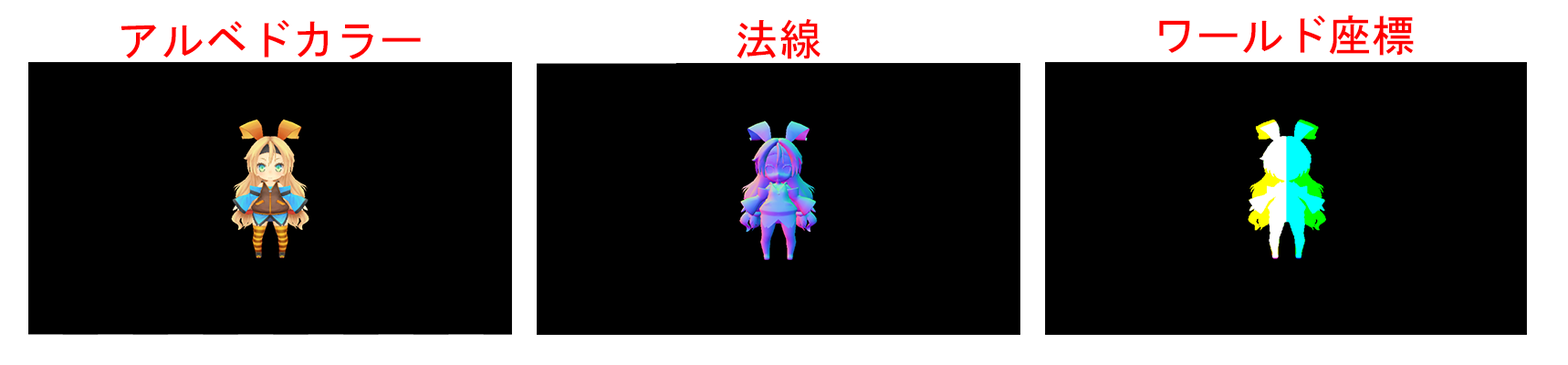
<style>
.page{position:relative;width:1568px;height:365px;background:#000000}
.page>*{position:absolute;margin:0}
.t1{font:43.8px "MS-Gothic";color:#ff0000}
</style>
<div class="page">
<p class="t1" style="left:1159px;top:15px;width:255px;height:41px">ワールド座標</p>
<p class="t1" style="left:121px;top:19px;width:300px;height:40px">アルベドカラー</p>
<p class="t1" style="left:737px;top:18px;width:84px;height:41px">法線</p>
</div>
